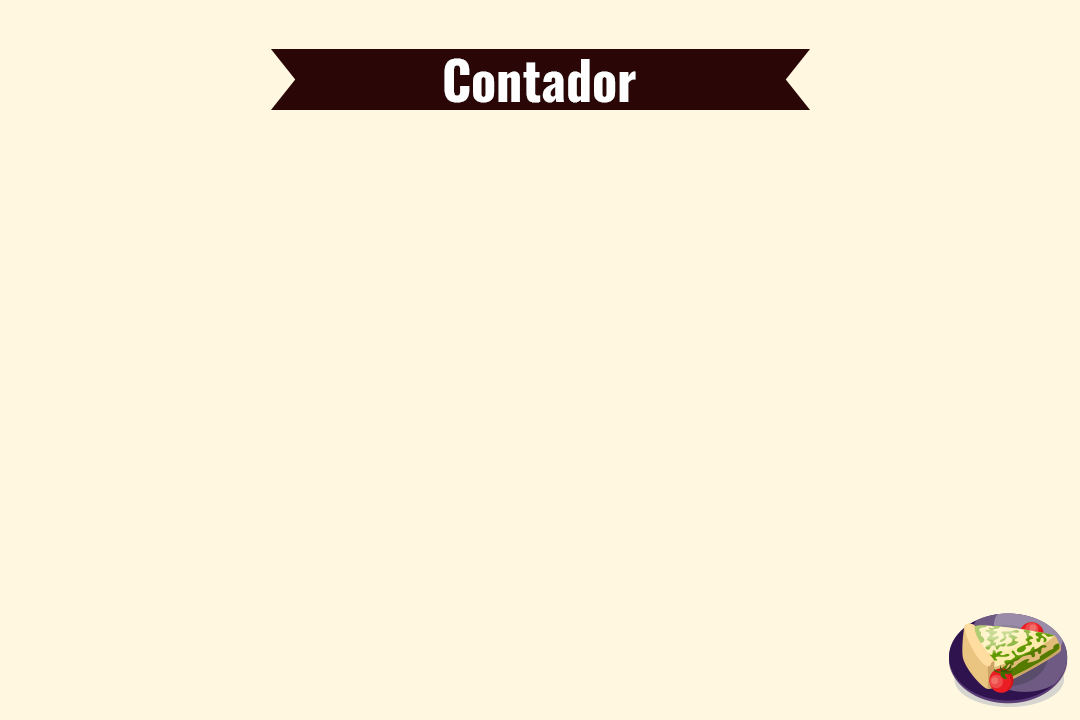
<style>
.page{position:relative;width:1080px;height:720px;background:#fff7df}
.page>*{position:absolute;margin:0}
.t1{font:51.7px "Oswald-Bold";color:#fefefe}
</style>
<div class="page">
<p class="t1" style="left:444px;top:58px;width:192px;height:45px">Contador</p>
</div>
